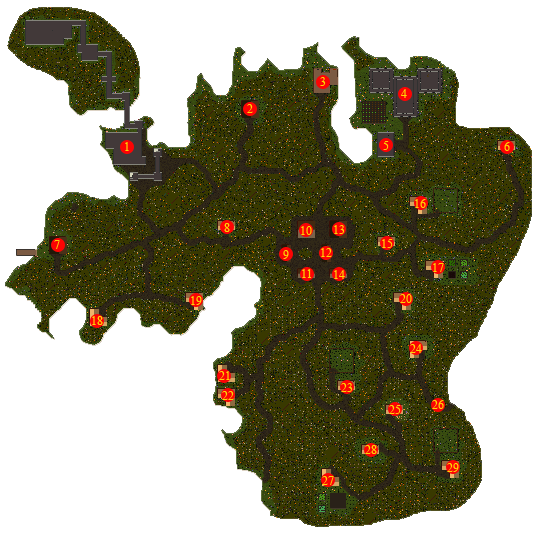
<style>
.page{position:relative;width:538px;height:534px;background:#ffffff}
.page>*{position:absolute;margin:0}
.t1{font:12px "TimesNewRomanPSMT";color:#fcd604}
</style>
<div class="page">
<p class="t1" style="left:320px;top:77px;width:6px;height:9px">3</p>
<p class="t1" style="left:401px;top:89px;width:6px;height:9px">4</p>
<p class="t1" style="left:247px;top:104px;width:6px;height:9px">2</p>
<p class="t1" style="left:125px;top:142px;width:4px;height:9px">1</p>
<p class="t1" style="left:383px;top:141px;width:6px;height:9px">5</p>
<p class="t1" style="left:504px;top:142px;width:6px;height:9px">6</p>
<p class="t1" style="left:415px;top:199px;width:11px;height:9px">16</p>
<p class="t1" style="left:224px;top:223px;width:6px;height:9px">8</p>
<p class="t1" style="left:301px;top:226px;width:11px;height:9px">10</p>
<p class="t1" style="left:334px;top:225px;width:11px;height:9px">13</p>
<p class="t1" style="left:54px;top:240px;width:6px;height:9px">7</p>
<p class="t1" style="left:382px;top:239px;width:11px;height:9px">15</p>
<p class="t1" style="left:283px;top:250px;width:6px;height:9px">9</p>
<p class="t1" style="left:321px;top:248px;width:11px;height:9px">12</p>
<p class="t1" style="left:302px;top:269px;width:10px;height:9px">11</p>
<p class="t1" style="left:334px;top:270px;width:11px;height:9px">14</p>
<p class="t1" style="left:433px;top:263px;width:11px;height:9px">17</p>
<p class="t1" style="left:400px;top:294px;width:12px;height:9px">20</p>
<p class="t1" style="left:191px;top:296px;width:11px;height:9px">19</p>
<p class="t1" style="left:92px;top:316px;width:11px;height:9px">18</p>
<p class="t1" style="left:410px;top:344px;width:12px;height:9px">24</p>
<p class="t1" style="left:219px;top:371px;width:11px;height:9px">21</p>
<p class="t1" style="left:341px;top:383px;width:12px;height:9px">23</p>
<p class="t1" style="left:222px;top:391px;width:12px;height:9px">22</p>
<p class="t1" style="left:432px;top:400px;width:12px;height:9px">26</p>
<p class="t1" style="left:389px;top:405px;width:12px;height:9px">25</p>
<p class="t1" style="left:365px;top:445px;width:12px;height:9px">28</p>
<p class="t1" style="left:447px;top:463px;width:12px;height:9px">29</p>
<p class="t1" style="left:322px;top:476px;width:12px;height:9px">27</p>
</div>
